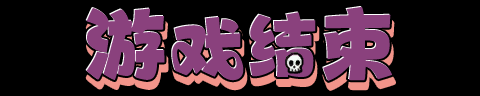
<style>
.page{position:relative;width:480px;height:96px;background:#000000}
.page>*{position:absolute;margin:0}
.t1{font:82.7px "zihunPOPhaibaoti";color:#8a417d;font-weight:bold}
.t2{font:74.7px "zihunPOPhaibaoti";color:#8a417d;font-weight:bold}
</style>
<div class="page">
<p class="t1" style="left:86px;top:8px;width:79px;height:72px">游</p>
<p class="t2" style="left:172px;top:16px;width:72px;height:65px">戏</p>
<p class="t2" style="left:250px;top:12px;width:66px;height:65px">结</p>
<p class="t1" style="left:323px;top:7px;width:69px;height:74px">束</p>
</div>
